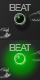
<style>
.page{position:relative;width:40px;height:80px}
.page>*{position:absolute;margin:0}
.t1{font:10.7px "SimianText-Orangutan";letter-spacing:-0.075em;color:#9c9c9c}
.t2{font:10.7px "SimianText-Orangutan";letter-spacing:-0.075em;color:#94b894}
</style>
<div class="page">
<p class="t1" style="left:9px;top:4px;width:22px;height:7px">BEAT</p>
<p class="t2" style="left:9px;top:44px;width:22px;height:7px">BEAT</p>
</div>
